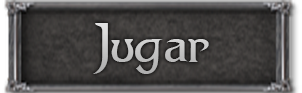
<style>
.page{position:relative;width:302px;height:93px}
.page>*{position:absolute;margin:0}
.t1{font:62.8px "Dumbledor1";color:#c5c4c4}
</style>
<div class="page">
<p class="t1" style="left:93px;top:23px;width:116px;height:51px">Jugar</p>
</div>
